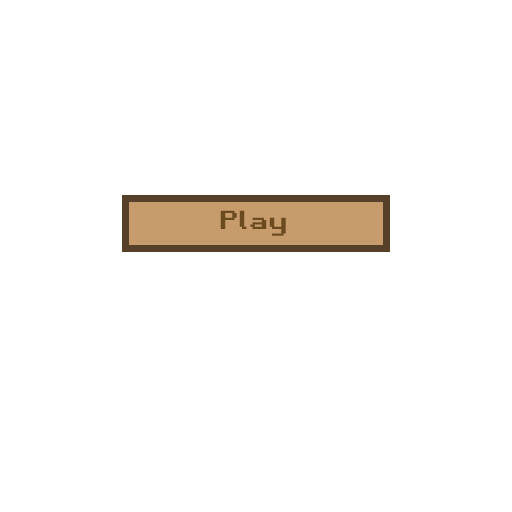
<style>
.page{position:relative;width:512px;height:512px;background:#ffffff}
.page>*{position:absolute;margin:0}
.t1{font:25px "RetroGaming";color:#6b4b1d}
</style>
<div class="page">
<p class="t1" style="left:220px;top:210px;width:66px;height:26px">Play</p>
</div>
